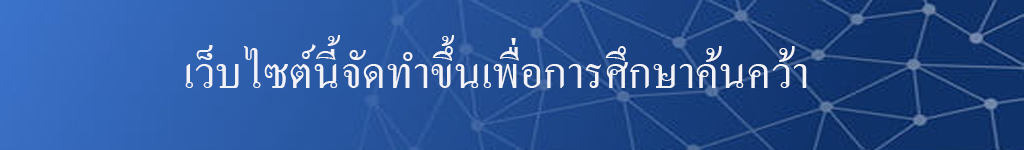
<style>
.page{position:relative;width:1024px;height:150px}
.page>*{position:absolute;margin:0}
.t1{font:60px "AngsanaNew";color:#f2f2f9}
</style>
<div class="page">
<p class="t1" style="left:185px;top:35px;width:622px;height:53px">เว็บไซต์นี้จัดทำขึ้นเพื่อการศึกษาค้นคว้า</p>
</div>
